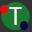
<style>
.page{position:relative;width:32px;height:32px;background:#197b30}
.page>*{position:absolute;margin:0}
.t1{font:25px "SegoeUISymbol";color:#fffcfa}
</style>
<div class="page">
<p class="t1" style="left:9px;top:7px;width:13px;height:18px">T</p>
</div>
